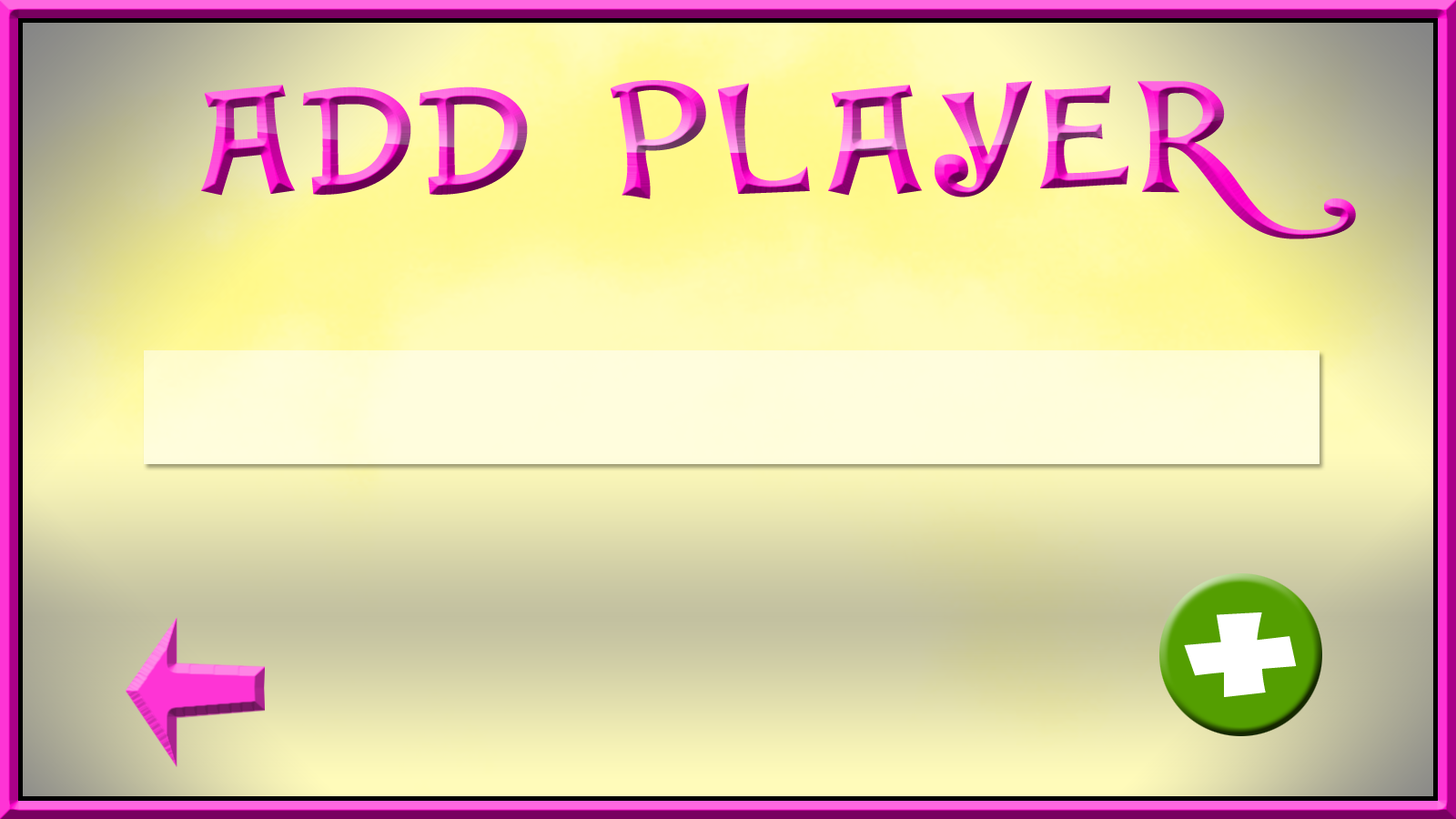
<style>
.page{position:relative;width:1456px;height:819px}
.page>*{position:absolute;margin:0}
.t1{font:145.6px "DKJambo";letter-spacing:0.05em;scale:1.25 1}
.t2{font:145.6px "ObelixProBroken";letter-spacing:0.05em;color:#ffffff;scale:1.25 1}
</style>
<div class="page">
<p class="t1" style="left:201px;top:80px;width:1155px;height:159px">ADD PLAYER</p>
<p class="t2" style="left:1184px;top:612px;width:113px;height:85px">+</p>
</div>
